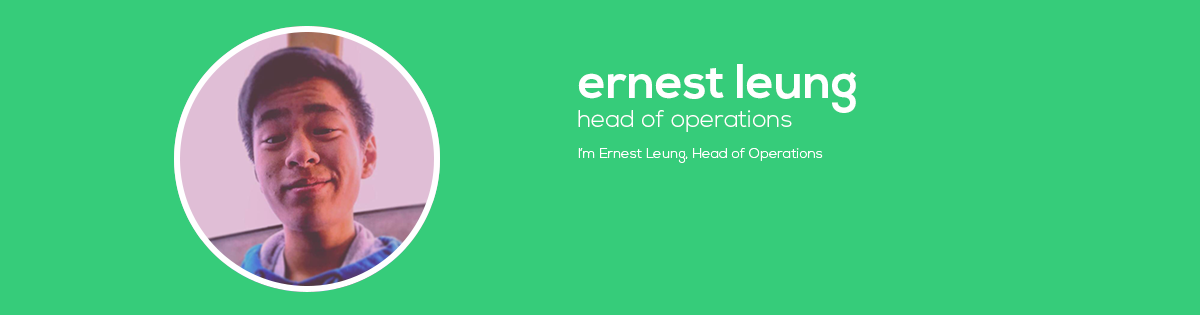
<style>
.page{position:relative;width:1200px;height:315px;background:#36cc7a}
.page>*{position:absolute;margin:0}
.t1{font:14px "NexaLight";color:#ffffff}
.t2{font:48px "NexaBold";color:#ffffff}
.t3{font:24px "NexaLight";color:#ffffff}
</style>
<div class="page">
<p class="t1" style="left:578px;top:64px;width:278px;height:99px"><span class="t2">ernest leung<br></span><span class="t3">head of operations<br><br></span>I’m Ernest Leung, Head of Operations</p>
</div>
